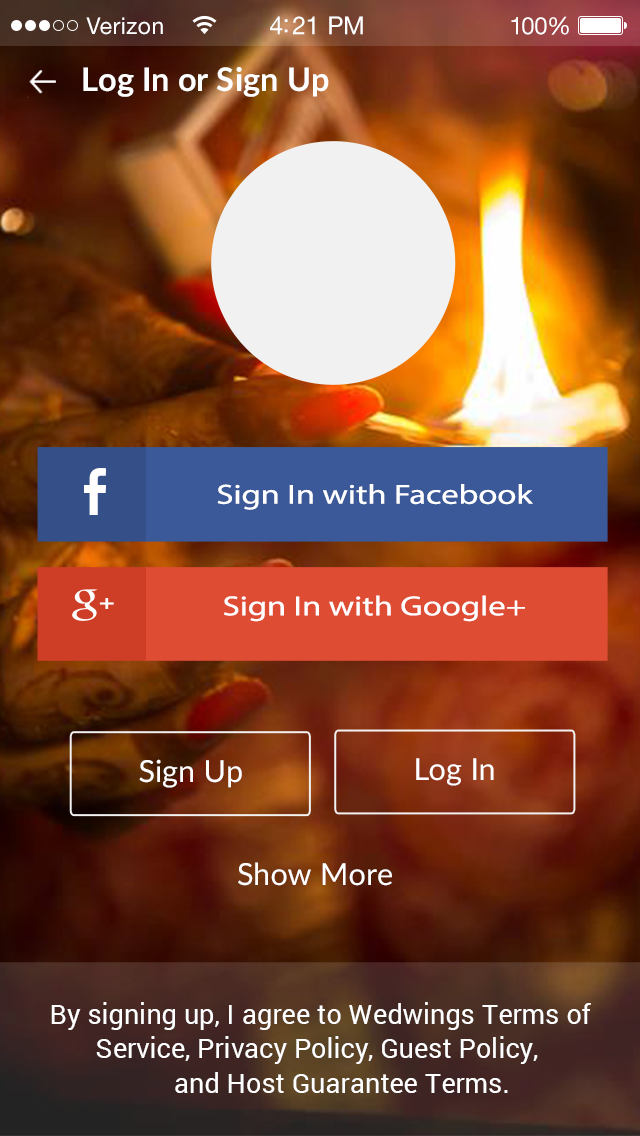
<style>
.page{position:relative;width:640px;height:1136px}
.page>*{position:absolute;margin:0}
.t1{font:23px "HelveticaNeueLTStd-Roman";letter-spacing:0.02em;color:#ffffff}
.t2{font:25px "HelveticaNeueLTStd-Roman";letter-spacing:-0.02em;color:#ffffff}
.t3{font:24px "HelveticaNeueLTStd-Roman";letter-spacing:-0.02em;color:#ffffff}
.t4{font:32.5px "Lato-Bold";color:#ffffff}
.t5{font:27.8px "MyriadPro-Regular";color:#ffffff;scale:1.25 1}
.t6{font:30.5px "Lato-Regular";color:#ffffff}
.t7{font:27.3px/34.5px "Roboto-Regular";color:#ffffff}
</style>
<div class="page">
<p class="t1" style="left:86px;top:17px;width:77px;height:18px">Verizon</p>
<p class="t2" style="left:270px;top:16px;width:93px;height:19px">4:21 PM</p>
<p class="t3" style="left:511px;top:16px;width:58px;height:19px">100%</p>
<p class="t4" style="left:83px;top:67px;width:246px;height:30px">Log In or Sign Up</p>
<p class="t5" style="left:217px;top:484px;width:316px;height:26px">Sign In with Facebook</p>
<p class="t5" style="left:224px;top:595px;width:301px;height:27px">Sign In with Google+</p>
<p class="t6" style="left:139px;top:759px;width:103px;height:29px">Sign Up</p>
<p class="t6" style="left:416px;top:758px;width:78px;height:28px">Log In</p>
<p class="t6" style="left:238px;top:862px;width:154px;height:24px">Show More</p>
<p class="t7" style="left:51px;top:1002px;width:540px;height:91px;text-align:center">By signing up, I agree to Wedwings Terms of <br>Service, Privacy Policy, Guest Policy, <br>      and Host Guarantee Terms.</p>
</div>
